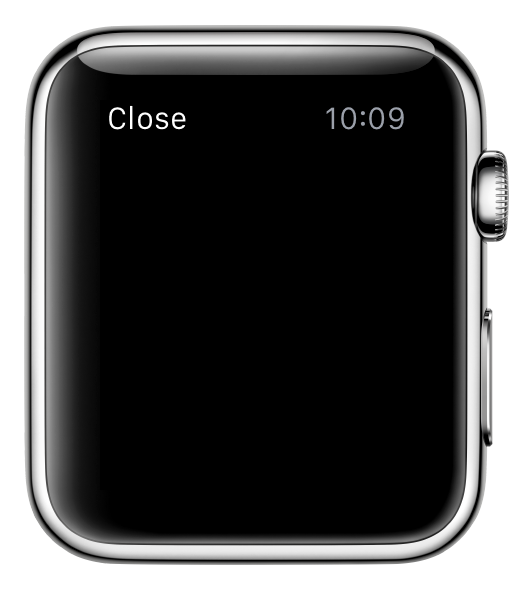
<style>
.page{position:relative;width:512px;height:590px;background:#000000}
.page>*{position:absolute;margin:0}
.t1{font:32px "SFCompactText-Regular";color:#ffffff}
.t2{font:32px "SFCompactText-Regular";color:#9ba0aa}
</style>
<div class="page">
<p class="t1" style="left:109px;top:105px;width:77px;height:25px">Close</p>
<p class="t2" style="left:326px;top:107px;width:78px;height:23px">10:09</p>
</div>
